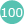
<style>
.page{position:relative;width:24px;height:24px;background:#56c2b1}
.page>*{position:absolute;margin:0}
.t1{font:11.9px "Meiryo";color:#ffffff}
</style>
<div class="page">
<p class="t1" style="left:1px;top:8px;width:22px;height:9px">100</p>
</div>
